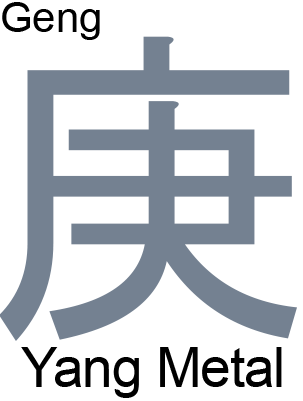
<style>
.page{position:relative;width:303px;height:401px;background:#ffffff}
.page>*{position:absolute;margin:0}
.t1{font:41.7px "ArialMT";color:#000000}
.t2{font:330.5px "MS-Gothic";color:#748191}
.t3{font:55px "ArialMT";letter-spacing:-0.02em;color:#000000}
</style>
<div class="page">
<p class="t1" style="left:2px;top:2px;width:98px;height:38px">Geng</p>
<p class="t2" style="left:0px;top:36px;width:297px;height:305px">庚</p>
<p class="t3" style="left:21px;top:347px;width:261px;height:51px">Yang Metal</p>
</div>
